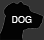
<style>
.page{position:relative;width:44px;height:40px;background:#030303}
.page>*{position:absolute;margin:0}
.t1{font:9px "Helvetica";color:#ffffff}
</style>
<div class="page">
<p class="t1" style="left:12px;top:16px;width:20px;height:7px">DOG</p>
</div>
